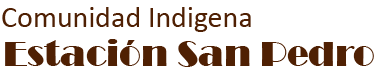
<style>
.page{position:relative;width:379px;height:75px;background:#ffffff}
.page>*{position:absolute;margin:0}
.t1{font:30px "Calibri";color:#4f2003}
.t2{font:36px "Broadway";color:#4f2003}
</style>
<div class="page">
<p class="t1" style="left:2px;top:7px;width:249px;height:25px">Comunidad Indigena</p>
<p class="t2" style="left:5px;top:39px;width:369px;height:28px">Estación San Pedro</p>
</div>
